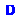
<style>
.page{position:relative;width:20px;height:20px;background:#ffffff}
.page>*{position:absolute;margin:0}
.t1{font:14px "Terminal";letter-spacing:0.28em;color:#0000ff;text-transform:uppercase;font-weight:bold;scale:1.5 1}
</style>
<div class="page">
<p class="t1" style="left:6px;top:5px;width:9px;height:10px">D</p>
</div>
